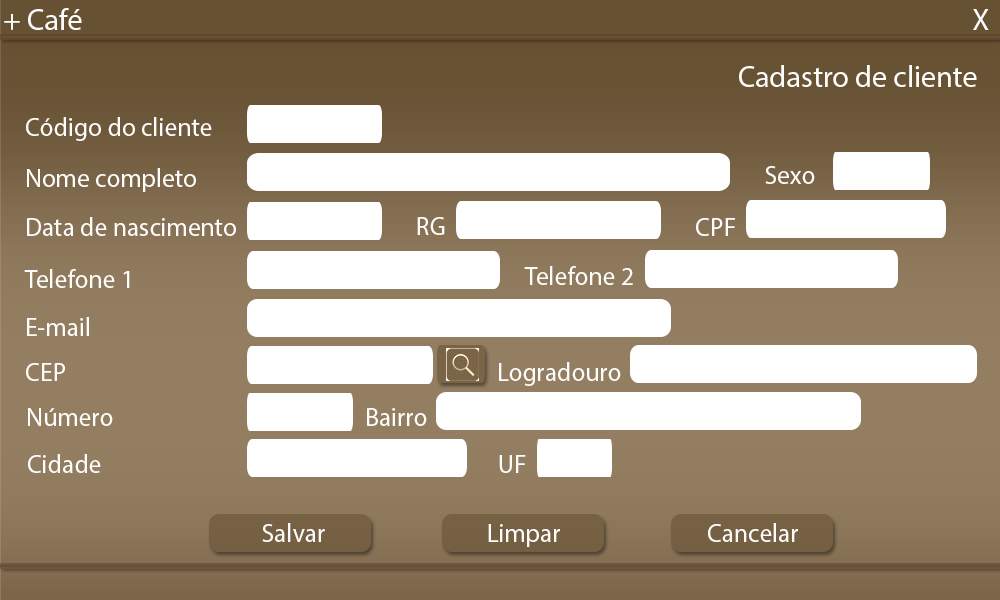
<style>
.page{position:relative;width:1000px;height:600px;background:#ffffff}
.page>*{position:absolute;margin:0}
.t1{font:30px "MyriadPro-Regular";color:#fefdfb}
.t2{font:30.1px "MyriadPro-Regular";color:#fefdfb}
.t3{font:29.9px "MyriadPro-Regular";color:#fefdfb}
.t4{font:25.7px "MyriadPro-Regular";color:#fefdfb}
.t5{font:55.1px "MyriadPro-Regular";color:#fefdfb}
</style>
<div class="page">
<p class="t1" style="left:4px;top:8px;width:78px;height:22px">+ Café</p>
<p class="t2" style="left:973px;top:9px;width:16px;height:21px">X</p>
<p class="t3" style="left:739px;top:65px;width:238px;height:22px">Cadastro de cliente</p>
<p class="t4" style="left:26px;top:117px;width:186px;height:24px">Código do cliente<br><span class="t5">Non</span></p>
<p class="t4" style="left:27px;top:168px;width:169px;height:24px">Nome completo<br><span class="t5">Non</span></p>
<p class="t4" style="left:765px;top:166px;width:50px;height:18px">Sexo<br><span class="t5">Non</span></p>
<p class="t4" style="left:27px;top:217px;width:209px;height:19px">Data de nascimento<br><span class="t5">Non</span></p>
<p class="t5" style="left:417px;top:217px;width:28px;height:18px"><span class="t4">RG<br></span>Non</p>
<p class="t4" style="left:696px;top:218px;width:39px;height:18px">CPF<br><br><span class="t5">Non</span></p>
<p class="t4" style="left:24px;top:269px;width:106px;height:19px">Telefone 1<br><span class="t5">Non</span></p>
<p class="t4" style="left:524px;top:266px;width:109px;height:19px">Telefone 2<br><br><span class="t5">Non</span></p>
<p class="t4" style="left:27px;top:317px;width:62px;height:19px">E-mail<br><br><span class="t5">Non</span></p>
<p class="t4" style="left:26px;top:363px;width:39px;height:18px">CEP<br><br><span class="t5">Non</span></p>
<p class="t4" style="left:499px;top:362px;width:122px;height:24px">Logradouro<br><br><span class="t5">Non</span></p>
<p class="t4" style="left:28px;top:408px;width:85px;height:18px">Número</p>
<p class="t4" style="left:367px;top:408px;width:60px;height:18px">Bairro<br><br><br><span class="t5">Non</span></p>
<p class="t4" style="left:28px;top:454px;width:73px;height:19px">Cidade<br><br><span class="t5">Non</span></p>
<p class="t5" style="left:499px;top:455px;width:27px;height:18px"><span class="t4">UF<br><br><br></span>Non</p>
<p class="t4" style="left:262px;top:523px;width:63px;height:19px">Salvar<br><br><br><span class="t5">Non</span></p>
<p class="t4" style="left:488px;top:524px;width:72px;height:23px">Limpar<br><br><br><span class="t5">Non</span></p>
<p class="t4" style="left:708px;top:523px;width:90px;height:19px">Cancelar<br><br><br><br><span class="t5">Non</span></p>
</div>
